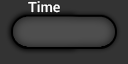
<style>
.page{position:relative;width:128px;height:64px;background:#333333}
.page>*{position:absolute;margin:0}
.t1{font:14px "Roboto-Medium";color:#ffffff}
</style>
<div class="page">
<p class="t1" style="left:28px;top:1px;width:32px;height:12px">Time</p>
</div>
